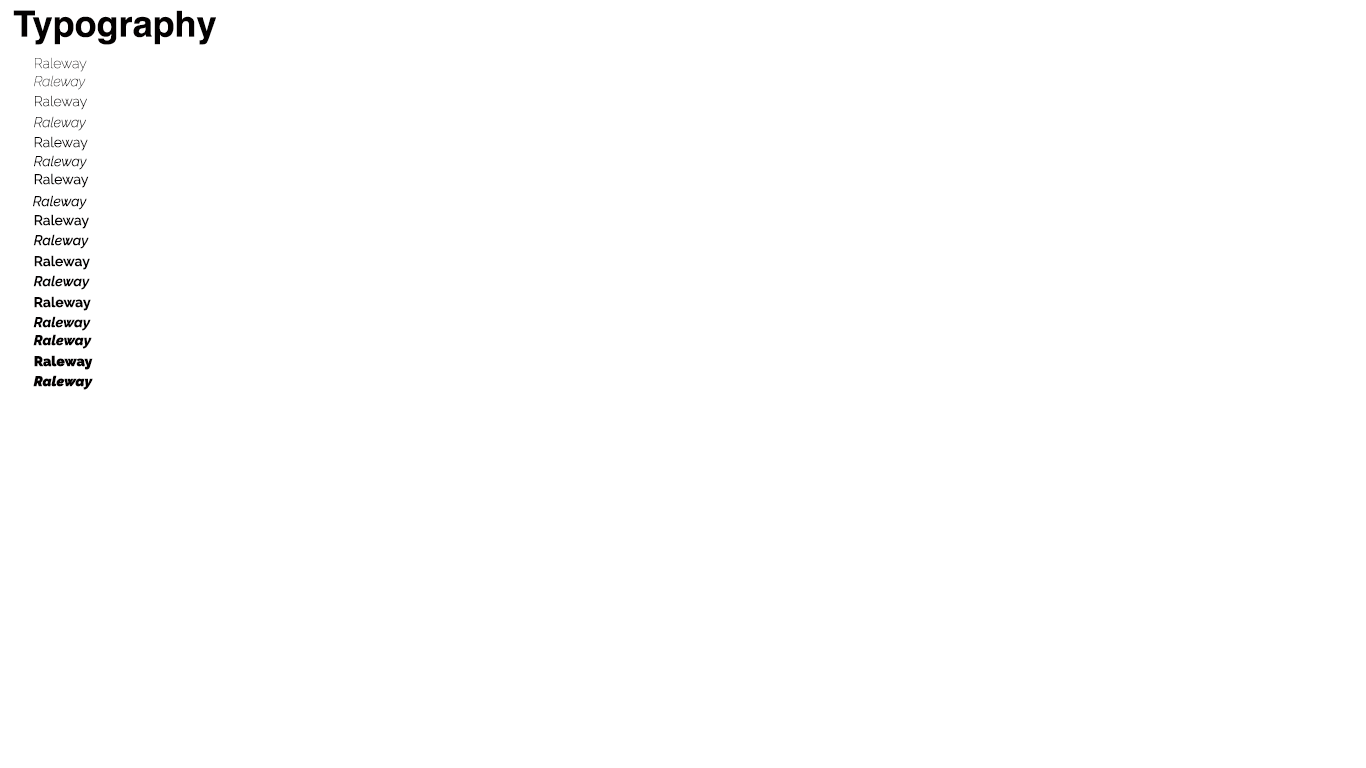
<style>
.page{position:relative;width:1366px;height:768px;background:#ffffff}
.page>*{position:absolute;margin:0}
.t1{font:36px "Helvetica-Bold";color:#030101}
.t2{font:14px "Raleway-Thin"}
.t3{font:14px "Raleway-ThinItalic";color:#262424}
.t4{font:14px "Raleway-ExtraLight";color:#030101}
.t5{font:14px "Raleway-ExtraLightItalic";color:#030101}
.t6{font:14px "Raleway-Light";color:#030101}
.t7{font:14px "Raleway-LightItalic";color:#030101}
.t8{font:14px "Raleway-Regular";color:#030101}
.t9{font:14px "Raleway-Italic";color:#030101}
.t10{font:14px "Raleway-Medium";color:#030101}
.t11{font:14px "Raleway-MediumItalic";color:#030101}
.t12{font:14px "Raleway-SemiBold";color:#030101}
.t13{font:14px "Raleway-SemiBoldItalic";color:#030101}
.t14{font:14px "Raleway-Bold";color:#030101}
.t15{font:14px "Raleway-BoldItalic";color:#030101}
.t16{font:14px "Raleway-ExtraBoldItalic";color:#030101}
.t17{font:14px "Raleway-Black";color:#030101}
.t18{font:14px "Raleway-BlackItalic";color:#030101}
</style>
<div class="page">
<p class="t1" style="left:13px;top:10px;width:203px;height:35px">Typography</p>
<p class="t2" style="left:35px;top:57px;width:52px;height:15px">Raleway</p>
<p class="t3" style="left:34px;top:75px;width:52px;height:15px">Raleway</p>
<p class="t4" style="left:35px;top:95px;width:52px;height:15px">Raleway</p>
<p class="t5" style="left:34px;top:116px;width:52px;height:15px">Raleway</p>
<p class="t6" style="left:34px;top:136px;width:54px;height:15px">Raleway</p>
<p class="t7" style="left:34px;top:155px;width:53px;height:15px">Raleway</p>
<p class="t8" style="left:34px;top:173px;width:55px;height:15px">Raleway</p>
<p class="t9" style="left:33px;top:195px;width:54px;height:15px">Raleway</p>
<p class="t10" style="left:34px;top:214px;width:55px;height:15px">Raleway</p>
<p class="t11" style="left:33px;top:234px;width:56px;height:15px">Raleway</p>
<p class="t12" style="left:34px;top:255px;width:56px;height:15px">Raleway</p>
<p class="t13" style="left:33px;top:275px;width:57px;height:15px">Raleway</p>
<p class="t14" style="left:34px;top:296px;width:57px;height:15px">Raleway</p>
<p class="t15" style="left:33px;top:316px;width:58px;height:15px">Raleway</p>
<p class="t16" style="left:33px;top:334px;width:59px;height:15px">Raleway</p>
<p class="t17" style="left:34px;top:355px;width:59px;height:15px">Raleway</p>
<p class="t18" style="left:33px;top:375px;width:60px;height:15px">Raleway</p>
</div>
